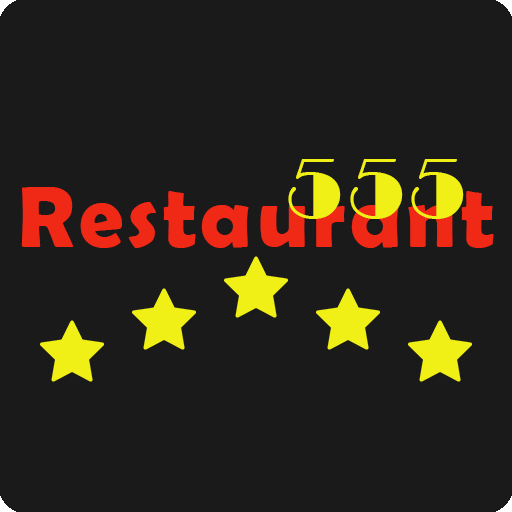
<style>
.page{position:relative;width:512px;height:512px;background:#1a1a1a}
.page>*{position:absolute;margin:0}
.t1{font:88px "Broadway";letter-spacing:0.05em;color:#f0f016}
.t2{font:88px "BerlinSansFBDemi-Bold";letter-spacing:0.05em;color:#f02816}
</style>
<div class="page">
<p class="t1" style="left:288px;top:159px;width:176px;height:60px">555</p>
<p class="t2" style="left:21px;top:187px;width:473px;height:61px">Restaurant</p>
</div>
